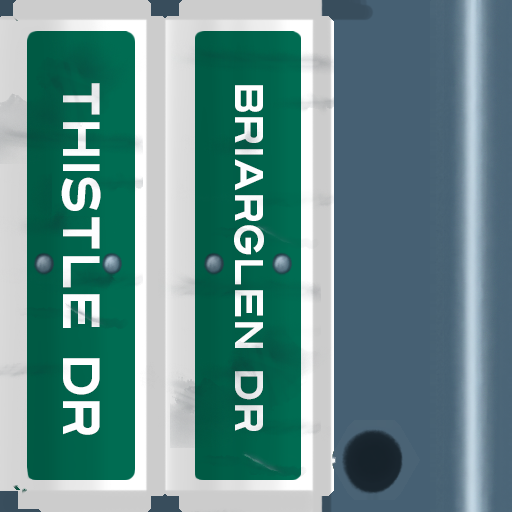
<style>
.page{position:relative;width:512px;height:512px}
.page>*{position:absolute;margin:0}
.t1{font:52px "Turnpike";color:#fefeff;scale:0.75 1}
.t2{font:40px "Turnpike";color:#fefeff;scale:0.75 1}
</style>
<div class="page">
<p class="t1" style="left:61px;top:83px;width:40px;height:352px;rotate:90deg">Thistle Dr</p>
<p class="t2" style="left:234px;top:85px;width:30px;height:346px;rotate:90deg">Briarglen Dr</p>
</div>
